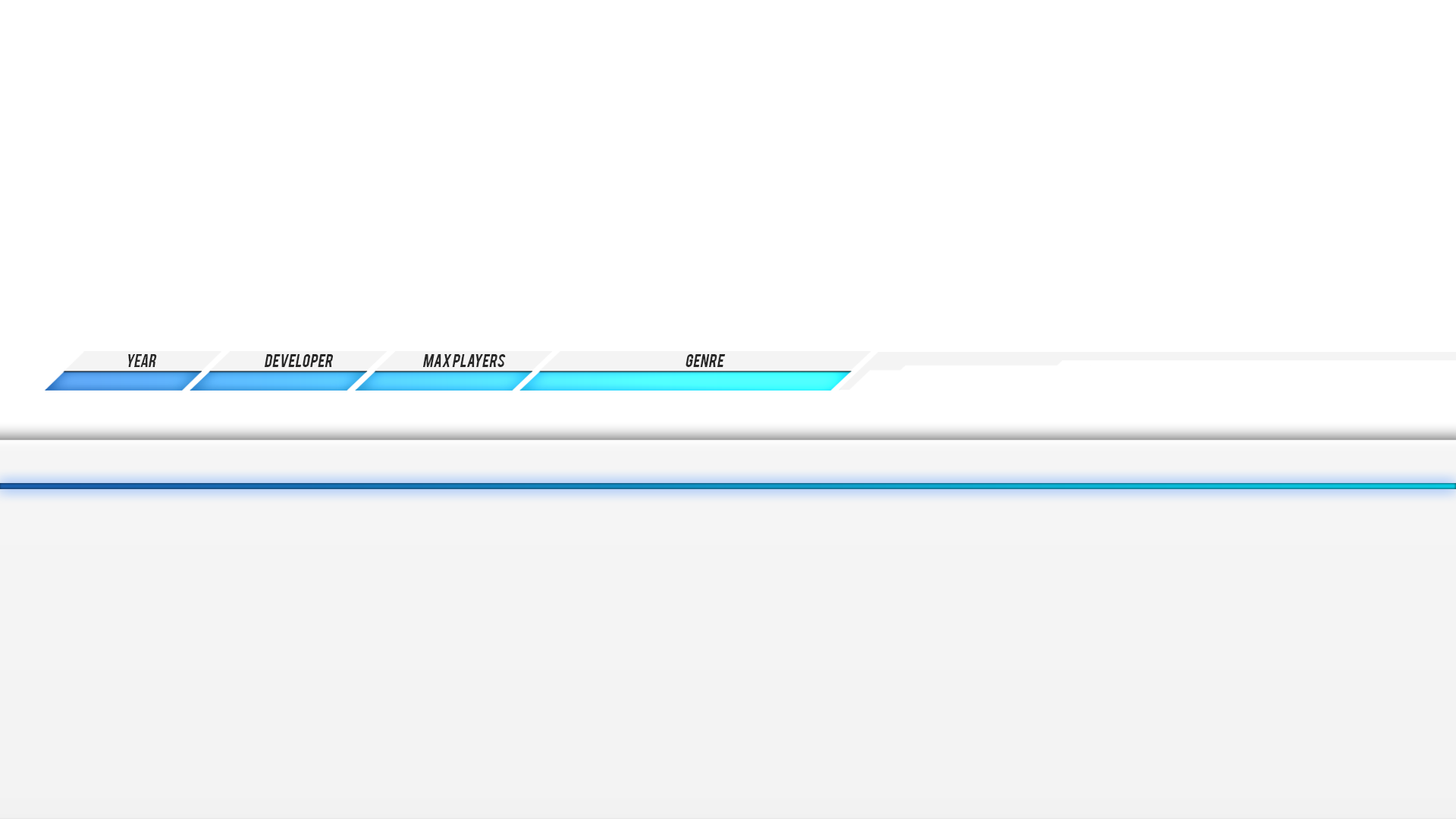
<style>
.page{position:relative;width:1456px;height:819px;background:#ffffff}
.page>*{position:absolute;margin:0}
.t1{font:18px "BebasNeue";letter-spacing:0.025em;color:#282828;font-style:italic}
.t2{font:14px "Bebas";letter-spacing:0.025em;color:#282828;font-style:italic}
</style>
<div class="page">
<p class="t1" style="left:128px;top:354px;width:29px;height:13px">year</p>
<p class="t2" style="left:264px;top:354px;width:69px;height:13px">developer</p>
<p class="t2" style="left:422px;top:354px;width:84px;height:13px">MAX PLAYERS</p>
<p class="t2" style="left:686px;top:354px;width:40px;height:13px">genre</p>
</div>
